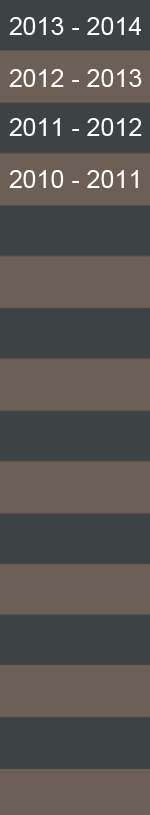
<style>
.page{position:relative;width:150px;height:815px;background:#3d4245}
.page>*{position:absolute;margin:0}
.t1{font:25px "ArialMT";color:#ffffff}
</style>
<div class="page">
<p class="t1" style="left:9px;top:17px;width:132px;height:18px">2013 - 2014</p>
<p class="t1" style="left:9px;top:69px;width:133px;height:18px">2012 - 2013</p>
<p class="t1" style="left:9px;top:118px;width:133px;height:18px">2011 - 2012</p>
<p class="t1" style="left:9px;top:170px;width:129px;height:18px">2010 - 2011</p>
</div>
